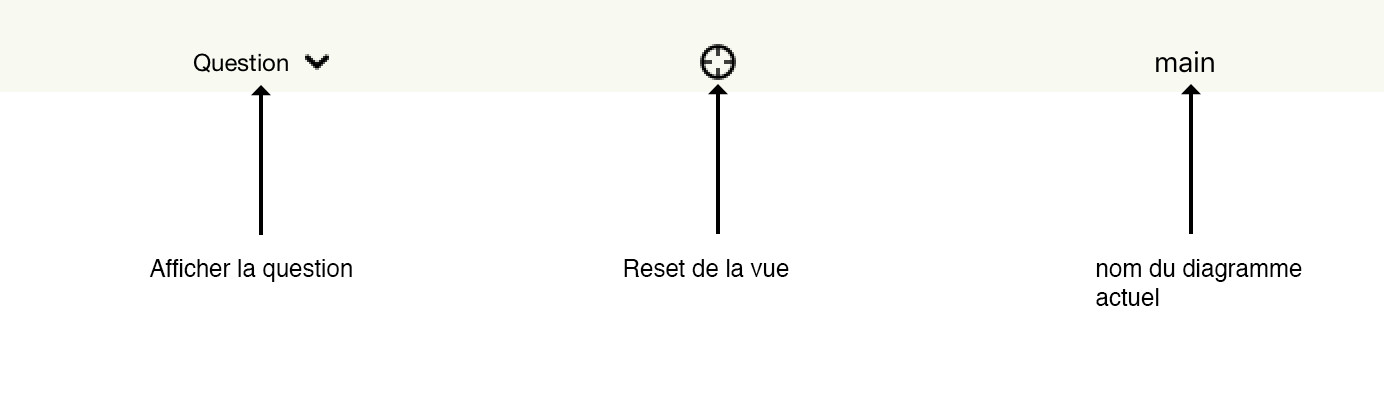
<style>
.page{position:relative;width:1384px;height:400px;background:#ffffff}
.page>*{position:absolute;margin:0}
.t1{font:12px "Helvetica";color:#000000}
</style>
<div class="page">
<p class="t1" style="left:149px;top:259px;width:203px;height:23px">Afficher la question</p>
<p class="t1" style="left:624px;top:259px;width:165px;height:18px">Reset de la vue</p>
<p class="t1" style="left:1096px;top:259px;width:206px;height:47px">nom du diagramme<br>actuel</p>
</div>
